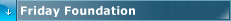
<style>
.page{position:relative;width:231px;height:21px}
.page>*{position:absolute;margin:0}
.t1{font:11.5px "Verdana-Bold";letter-spacing:0.025em;color:#ffffff;scale:0.95 1}
</style>
<div class="page">
<p class="t1" style="left:21px;top:6px;width:114px;height:11px">Friday Foundation</p>
</div>
